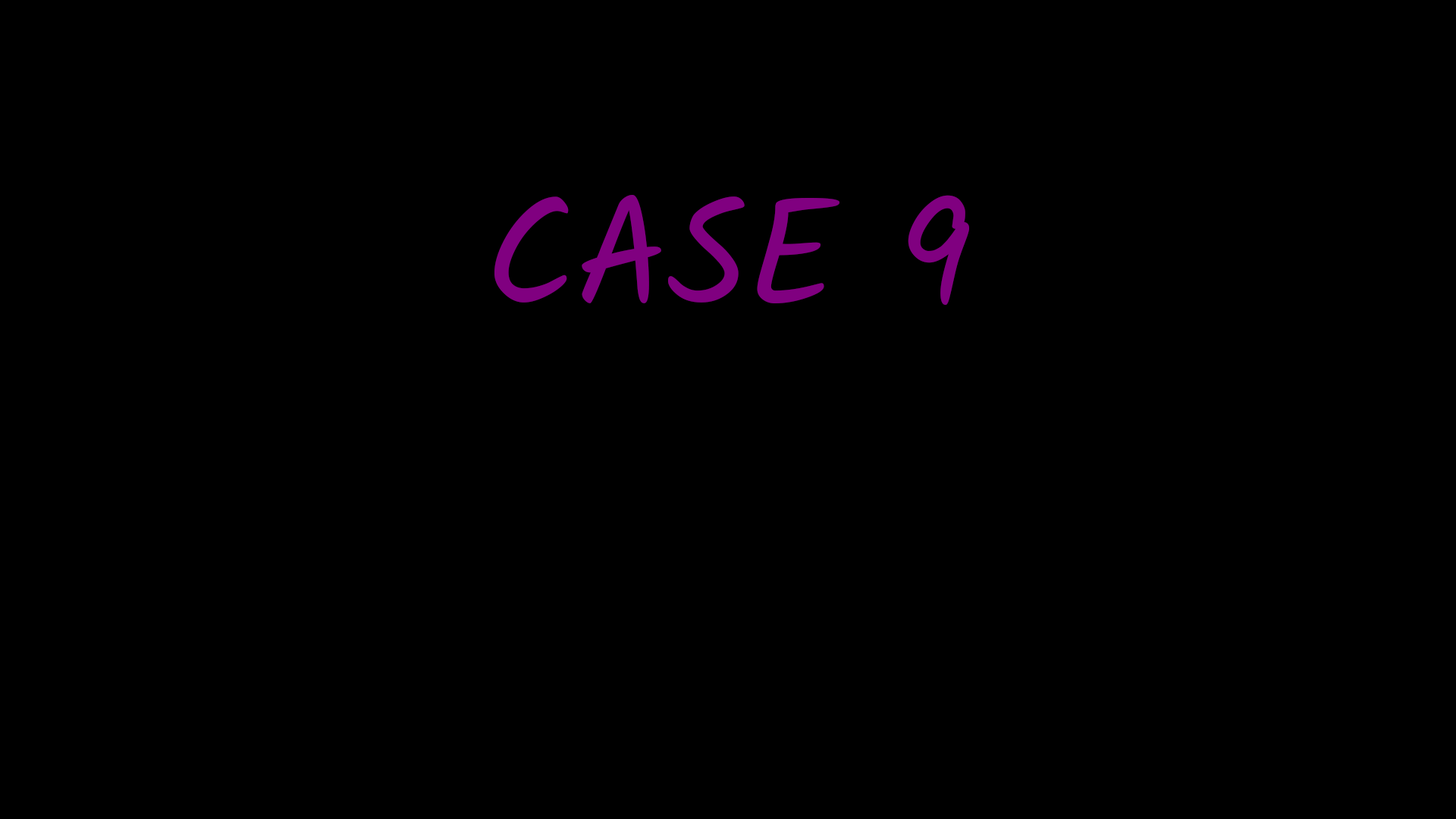
<style>
.page{position:relative;width:1456px;height:819px;background:#000000}
.page>*{position:absolute;margin:0}
.t1{font:151.7px "Kalam-Regular";color:#800080}
</style>
<div class="page">
<p class="t1" style="left:494px;top:195px;width:475px;height:110px">CASE 9</p>
</div>
